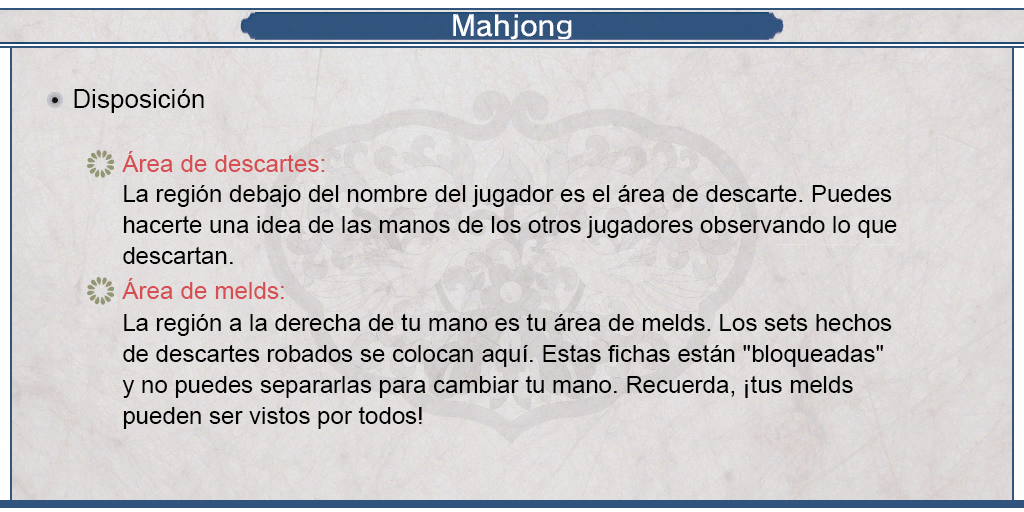
<style>
.page{position:relative;width:1024px;height:512px}
.page>*{position:absolute;margin:0}
.t1{font:26px "ArialMT";color:#000000}
.t2{font:24px "ArialMT";color:#d64d52}
.t3{font:24px/31px "ArialMT";color:#000000}
</style>
<div class="page">
<p class="t1" style="left:74px;top:89px;width:130px;height:24px">Disposición</p>
<p class="t2" style="left:122px;top:151px;width:203px;height:21px">Área de descartes:</p>
<p class="t3" style="left:123px;top:184px;width:774px;height:80px;text-align:justify">La región debajo del nombre del jugador es el área de descarte. Puedes<br>hacerte una idea de las manos de los otros jugadores observando lo que<br>descartan.</p>
<p class="t2" style="left:122px;top:278px;width:162px;height:21px">Área de melds:</p>
<p class="t3" style="left:122px;top:313px;width:770px;height:116px;text-align:justify">La región a la derecha de tu mano es tu área de melds. Los sets hechos<br>de descartes robados se colocan aquí. Estas fichas están "bloqueadas"<br>y no puedes separarlas para cambiar tu mano. Recuerda, ¡tus melds<br>pueden ser vistos por todos!</p>
</div>
